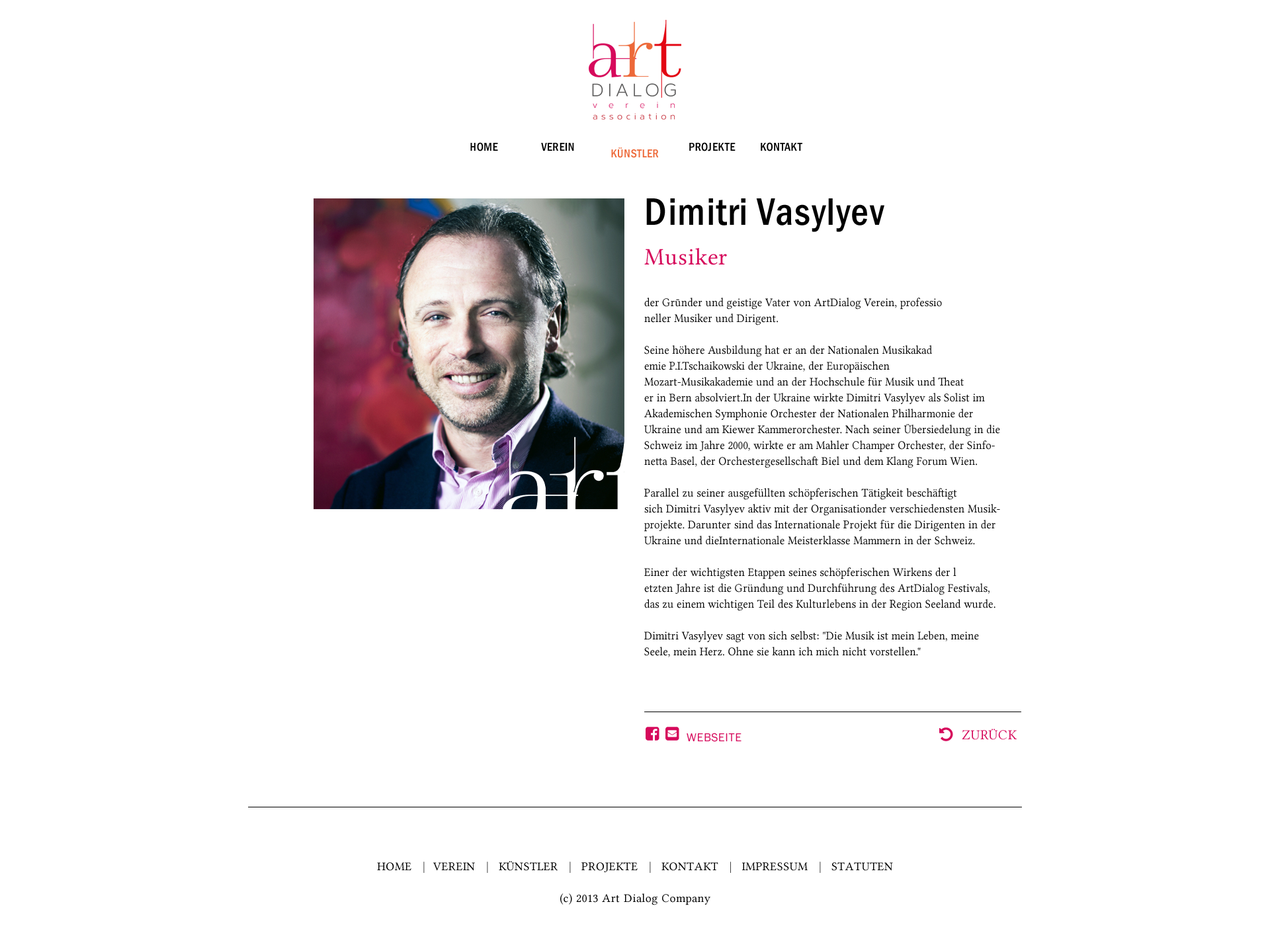
<style>
.page{position:relative;width:1270px;height:939px;background:#ffffff}
.page>*{position:absolute;margin:0}
.t1{font:11.9px "FranklinGothic-MediumCond";letter-spacing:0.025em;color:#000000;text-transform:uppercase}
.t2{font:11.9px "FranklinGothic-MediumCond";letter-spacing:0.025em;color:#ed6939;text-transform:uppercase}
.t3{font:39.7px "FranklinGothic-MediumCond";letter-spacing:0.025em;color:#000000}
.t4{font:39.7px "FranklinGothic-MediumCond";letter-spacing:0.025em;color:#000000;text-transform:uppercase}
.t5{font:23.8px/39.7px "LinLibertine";letter-spacing:0.025em;color:#d6095b}
.t6{font:11.9px/15.9px "LinLibertine";color:#000000;scale:0.94 1}
.t7{font:11.9px "FranklinGothic-Book";letter-spacing:0.025em;color:#d6095b;text-transform:uppercase}
.t8{font:13.9px "LinLibertine";letter-spacing:0.025em;color:#d6095b;text-transform:uppercase}
.t9{font:11.9px/15.9px "LinLibertine";letter-spacing:0.025em;color:#000000}
.t10{font:11.9px/15.9px "Georgia";letter-spacing:0.025em;color:#000000;text-transform:uppercase}
.t11{font:11.9px/15.9px "LinLibertine";letter-spacing:0.025em;color:#000000;text-transform:uppercase}
.t12{font:11.9px "LinLibertine";color:#000000}
</style>
<div class="page">
<p class="t1" style="left:470px;top:141px;width:332px;height:10px">Home  Verein  Künstler   Projekte   Kontakt</p>
<p class="t2" style="left:611px;top:147px;width:48px;height:11px">Künstler</p>
<p class="t3" style="left:644px;top:198px;width:240px;height:67px"><span class="t4">D</span>imitri<span class="t4"> V</span>asylyev<br><span class="t5">Musiker</span></p>
<p class="t6" style="left:644px;top:298px;width:356px;height:359px">der Grūnder und geistige Vater von ArtDialog Verein, professio<br>neller Musiker und Dirigent.<br><br>Seine höhere Ausbildung hat er an der Nationalen Musikakad<br>emie P.I.Tschaikowski der Ukraine, der Europäischen<br>Mozart-Musikakademie und an der Hochschule für Musik und Theat<br>er in Bern absolviert.In der Ukraine wirkte Dimitri Vasylyev als Solist im Akademischen Symphonie Orchester der Nationalen Philharmonie der Ukraine und am Kiewer Kammerorchester. Nach seiner Übersiedelung in die Schweiz im Jahre 2000, wirkte er am Mahler Champer Orchester, der Sinfonetta Basel, der Orchestergesellschaft Biel und dem Klang Forum Wien.<br><br>Parallel zu seiner ausgefüllten schöpferischen Tätigkeit beschäftigt<br>sich Dimitri Vasylyev aktiv mit der Organisationder verschiedensten Musikprojekte. Darunter sind das Internationale Projekt für die Dirigenten in der Ukraine und dieInternationale Meisterklasse Mammern in der Schweiz.<br><br>Einer der wichtigsten Etappen seines schöpferischen Wirkens der l<br>etzten Jahre ist die Gründung und Durchführung des ArtDialog Festivals, das zu einem wichtigen Teil des Kulturlebens in der Region Seeland wurde.<br><br>Dimitri Vasylyev sagt von sich selbst: "Die Musik ist mein Leben, meine<br>Seele, mein Herz. Ohne sie kann ich mich nicht vorstellen."</p>
<p class="t7" style="left:686px;top:733px;width:55px;height:9px">WEBSEITE</p>
<p class="t8" style="left:962px;top:729px;width:54px;height:11px">zurück</p>
<p class="t9" style="left:377px;top:861px;width:516px;height:44px"><span class="t10"><br><br></span><span class="t11">Home   </span><span class="t12">|    </span><span class="t11">Verein   </span><span class="t12">|   </span><span class="t11">Künstler   </span><span class="t12">|   </span><span class="t11">Projekte   </span><span class="t12">|   </span><span class="t11">Kontakt   </span><span class="t12">|   </span><span class="t11">Impressum   </span><span class="t12">|   </span><span class="t11">Statuten   <br><br></span>(c) 2013 Art Dialog Company</p>
</div>
